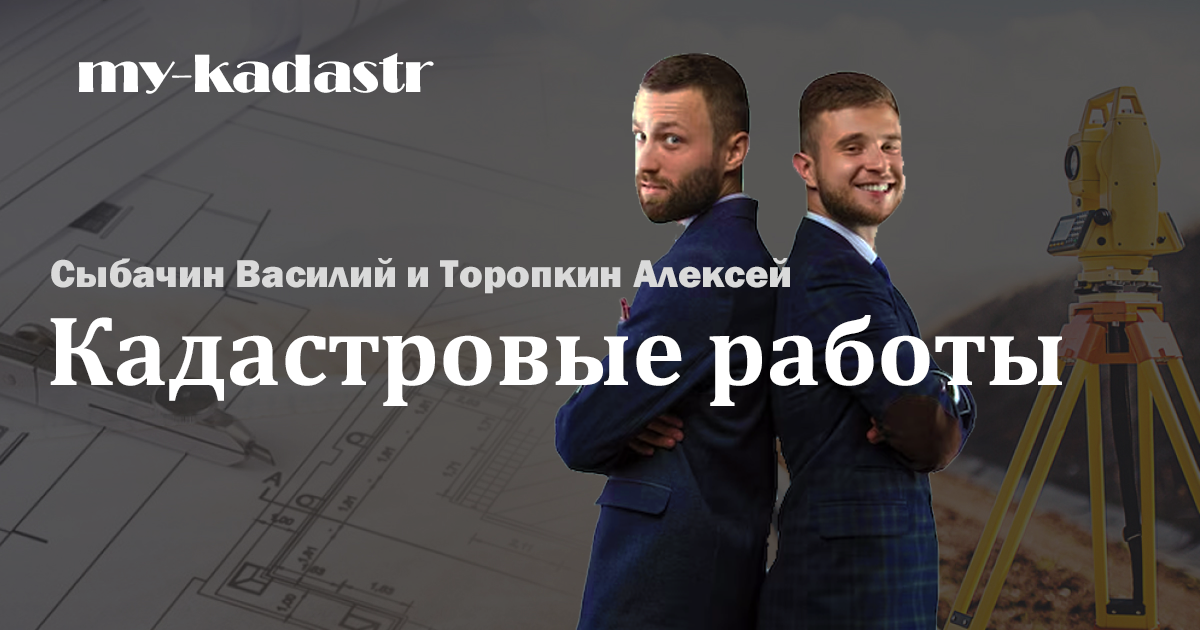
<style>
.page{position:relative;width:1200px;height:630px}
.page>*{position:absolute;margin:0}
.t1{font:56px "Broadway";color:#ffffff}
.t2{font:40px "FranklinGothic-Heavy";color:#dadada}
.t3{font:100px "Cambria-Bold";color:#ffffff}
</style>
<div class="page">
<p class="t1" style="left:79px;top:52px;width:355px;height:42px">my-kadastr</p>
<p class="t2" style="left:51px;top:258px;width:739px;height:36px">Сыбачин Василий и Торопкин Алексей</p>
<p class="t3" style="left:50px;top:315px;width:1012px;height:91px">Кадастровые работы</p>
</div>
